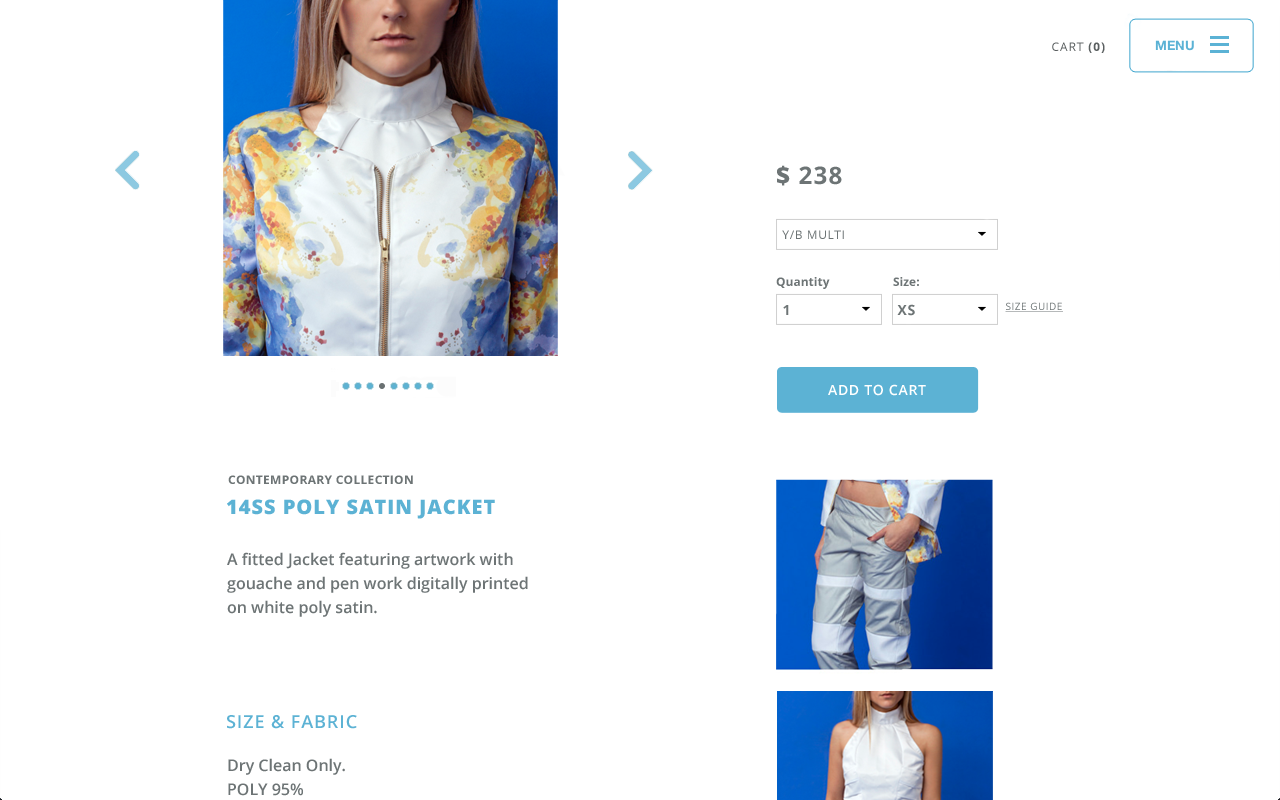
<style>
.page{position:relative;width:1280px;height:800px;background:#ffffff}
.page>*{position:absolute;margin:0}
.t1{font:12px "OpenSans";letter-spacing:0.075em;color:#5a5f60;text-transform:uppercase}
.t2{font:12px "OpenSans-Bold";letter-spacing:0.075em;color:#5a5f60;text-transform:uppercase}
.t3{font:24px "OpenSans-Bold";letter-spacing:0.05em;color:#6d7475}
.t4{font:24px "OpenSans-Extrabold";letter-spacing:0.05em;color:#6d7475}
.t5{font:12px "OpenSans";letter-spacing:0.05em;color:#6d7475}
.t6{font:12px "OpenSans-Bold";color:#6d7475}
.t7{font:14px "OpenSans-Bold";letter-spacing:0.05em;color:#6d7475;text-transform:uppercase}
.t8{font:10px "OpenSans";letter-spacing:0.05em;color:#6d7475;text-transform:uppercase;text-decoration:underline}
.t9{font:14px "OpenSans-Semibold";letter-spacing:0.05em;color:#ffffff;text-transform:uppercase}
.t10{font:12px "OpenSans-Bold";letter-spacing:0.025em;color:#6d7475}
.t11{font:20px "OpenSans-Extrabold";letter-spacing:0.05em;color:#5cb2d4}
.t12{font:16px/24px "OpenSans-Semibold";color:#6d7475}
.t13{font:18px "OpenSans-Semibold";letter-spacing:0.05em;color:#5cb2d4}
</style>
<div class="page">
<p class="t1" style="left:1052px;top:42px;width:53px;height:11px">cart <span class="t2">(0)</span></p>
<p class="t3" style="left:777px;top:165px;width:65px;height:21px"><span class="t4">$ </span>238</p>
<p class="t5" style="left:782px;top:230px;width:62px;height:9px">Y/B MULTI</p>
<p class="t6" style="left:776px;top:277px;width:54px;height:12px">Quantity</p>
<p class="t6" style="left:893px;top:277px;width:26px;height:9px">Size:</p>
<p class="t7" style="left:783px;top:305px;width:6px;height:10px">1</p>
<p class="t7" style="left:897px;top:304px;width:18px;height:12px">XS</p>
<p class="t8" style="left:1005px;top:302px;width:58px;height:10px">Size Guide</p>
<p class="t9" style="left:828px;top:384px;width:98px;height:12px">ADD TO CART</p>
<p class="t10" style="left:228px;top:475px;width:185px;height:9px">CONTEMPORARY COLLECTION</p>
<p class="t11" style="left:227px;top:499px;width:268px;height:20px">14SS POLY SATIN JACKET</p>
<p class="t12" style="left:227px;top:552px;width:301px;height:65px">A fitted Jacket featuring artwork with gouache and pen work digitally printed <br>on white poly satin.</p>
<p class="t13" style="left:227px;top:715px;width:130px;height:14px">SIZE &amp; FABRIC</p>
<p class="t12" style="left:228px;top:758px;width:117px;height:38px">Dry Clean Only.<br>POLY 95%</p>
</div>
